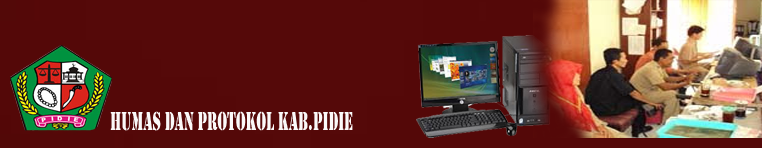
<style>
.page{position:relative;width:762px;height:148px;background:#550909}
.page>*{position:absolute;margin:0}
.t1{font:27px "Stencil";color:#fbf9f9;scale:0.56 1}
</style>
<div class="page">
<p class="t1" style="left:110px;top:111px;width:243px;height:20px">HUMAS DAN PROTOKOL KAB.PIDIE</p>
</div>
